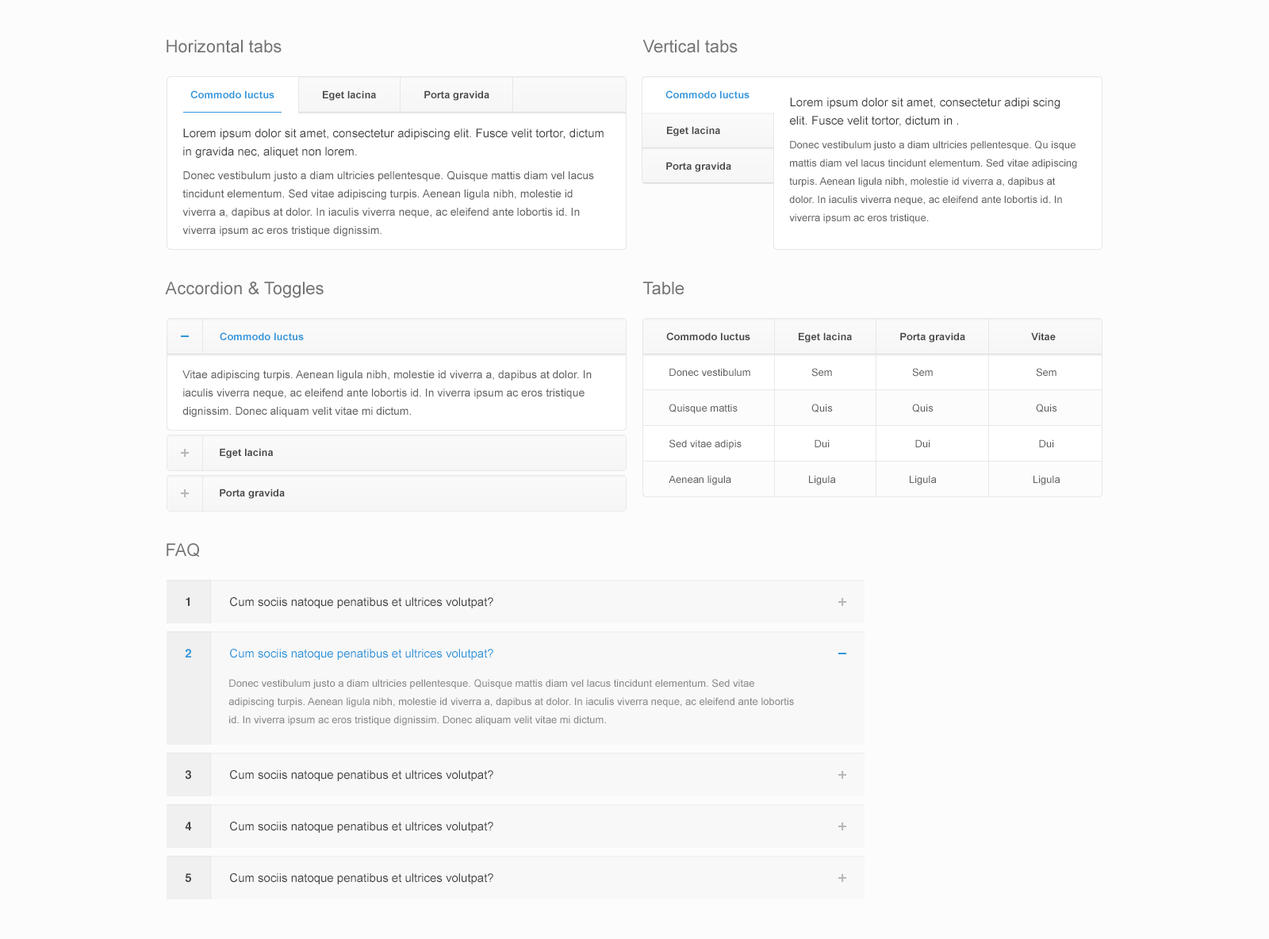
<style>
.page{position:relative;width:1269px;height:939px;background:#fcfcfc}
.page>*{position:absolute;margin:0}
.t1{font:17.5px "ArialMT";color:#737373}
.t2{font:10.3px "Arial-BoldMT";color:#2e96db}
.t3{font:10.3px "Arial-BoldMT";color:#444444}
.t4{font:11.9px/18.3px "ArialMT";color:#444444}
.t5{font:10.3px/18.3px "ArialMT";color:#626262}
.t6{font:11.1px/18.3px "ArialMT";color:#626262}
.t7{font:10.3px/35.7px "ArialMT";color:#626262}
.t8{font:11.9px "HelveticaWorld-Bold";color:#444444}
.t9{font:11.9px "ArialMT";color:#444444}
.t10{font:11.9px "HelveticaWorld-Bold";color:#2e96db}
.t11{font:11.9px "ArialMT";color:#2e96db}
.t12{font:10.3px/18.3px "ArialMT";color:#888888}
</style>
<div class="page">
<p class="t1" style="left:167px;top:40px;width:115px;height:13px">Horizontal tabs</p>
<p class="t1" style="left:643px;top:40px;width:95px;height:13px">Vertical tabs</p>
<p class="t2" style="left:190px;top:90px;width:85px;height:8px">Commodo luctus</p>
<p class="t3" style="left:323px;top:90px;width:53px;height:11px">Eget lacina</p>
<p class="t3" style="left:424px;top:90px;width:66px;height:11px">Porta gravida</p>
<p class="t2" style="left:666px;top:90px;width:84px;height:8px">Commodo luctus</p>
<p class="t4" style="left:790px;top:98px;width:271px;height:29px">Lorem ipsum dolor sit amet, consectetur adipi scing elit. Fusce velit tortor, dictum in .</p>
<p class="t4" style="left:183px;top:129px;width:421px;height:29px">Lorem ipsum dolor sit amet, consectetur adipiscing elit. Fusce velit tortor, dictum in gravida nec, aliquet non lorem.</p>
<p class="t3" style="left:667px;top:126px;width:53px;height:10px">Eget lacina</p>
<p class="t5" style="left:789px;top:140px;width:288px;height:84px">Donec vestibulum justo a diam ultricies pellentesque. Qu isque mattis diam vel lacus tincidunt elementum. Sed vitae adipiscing turpis. Aenean ligula nibh, molestie id viverra a, dapibus at dolor. In iaculis viverra neque, ac eleifend ante lobortis id. In viverra ipsum ac eros tristique.</p>
<p class="t3" style="left:666px;top:162px;width:65px;height:10px">Porta gravida</p>
<p class="t6" style="left:182px;top:171px;width:412px;height:65px">Donec vestibulum justo a diam ultricies pellentesque. Quisque mattis diam vel lacus tincidunt elementum. Sed vitae adipiscing turpis. Aenean ligula nibh, molestie id viverra a, dapibus at dolor. In iaculis viverra neque, ac eleifend ante lobortis id. In viverra ipsum ac eros tristique dignissim.</p>
<p class="t1" style="left:165px;top:282px;width:159px;height:16px">Accordion &amp; Toggles</p>
<p class="t1" style="left:643px;top:282px;width:42px;height:13px">Table</p>
<p class="t2" style="left:220px;top:332px;width:84px;height:8px">Commodo luctus</p>
<p class="t3" style="left:666px;top:332px;width:85px;height:8px">Commodo luctus</p>
<p class="t3" style="left:799px;top:332px;width:53px;height:11px">Eget lacina</p>
<p class="t3" style="left:900px;top:332px;width:66px;height:11px">Porta gravida</p>
<p class="t3" style="left:1031px;top:332px;width:25px;height:8px">Vitae</p>
<p class="t6" style="left:182px;top:371px;width:410px;height:46px">Vitae adipiscing turpis. Aenean ligula nibh, molestie id viverra a, dapibus at dolor. In iaculis viverra neque, ac eleifend ante lobortis id. In viverra ipsum ac eros tristique dignissim. Donec aliquam velit vitae mi dictum.</p>
<p class="t7" style="left:669px;top:368px;width:82px;height:118px">Donec vestibulum<br>Quisque mattis<br>Sed vitae adipis<br>Aenean ligula</p>
<p class="t7" style="left:809px;top:368px;width:27px;height:118px;text-align:center">Sem<br>Quis<br>Dui<br>Ligula</p>
<p class="t7" style="left:910px;top:368px;width:27px;height:118px;text-align:center">Sem<br>Quis<br>Dui<br>Ligula</p>
<p class="t7" style="left:1034px;top:368px;width:27px;height:118px;text-align:center">Sem<br>Quis<br>Dui<br>Ligula</p>
<p class="t3" style="left:220px;top:448px;width:54px;height:11px">Eget lacina</p>
<p class="t3" style="left:220px;top:489px;width:65px;height:10px">Porta gravida</p>
<p class="t1" style="left:167px;top:543px;width:33px;height:15px">FAQ</p>
<p class="t8" style="left:186px;top:597px;width:4px;height:9px">1</p>
<p class="t9" style="left:230px;top:597px;width:263px;height:12px">Cum sociis natoque penatibus et ultrices volutpat?</p>
<p class="t10" style="left:185px;top:649px;width:6px;height:9px">2</p>
<p class="t11" style="left:230px;top:649px;width:263px;height:11px">Cum sociis natoque penatibus et ultrices volutpat?</p>
<p class="t12" style="left:228px;top:679px;width:566px;height:47px">Donec vestibulum justo a diam ultricies pellentesque. Quisque mattis diam vel lacus tincidunt elementum. Sed vitae adipiscing turpis. Aenean ligula nibh, molestie id viverra a, dapibus at dolor. In iaculis viverra neque, ac eleifend ante lobortis id. In viverra ipsum ac eros tristique dignissim. Donec aliquam velit vitae mi dictum.</p>
<p class="t8" style="left:185px;top:770px;width:6px;height:10px">3</p>
<p class="t9" style="left:230px;top:770px;width:263px;height:11px">Cum sociis natoque penatibus et ultrices volutpat?</p>
<p class="t8" style="left:185px;top:822px;width:7px;height:9px">4</p>
<p class="t9" style="left:230px;top:822px;width:263px;height:11px">Cum sociis natoque penatibus et ultrices volutpat?</p>
<p class="t8" style="left:185px;top:874px;width:6px;height:9px">5</p>
<p class="t9" style="left:230px;top:874px;width:263px;height:11px">Cum sociis natoque penatibus et ultrices volutpat?</p>
</div>
